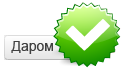
<style>
.page{position:relative;width:121px;height:71px;background:#ffffff}
.page>*{position:absolute;margin:0}
.t1{font:14px "ArialMT";color:#414141}
</style>
<div class="page">
<p class="t1" style="left:11px;top:41px;width:42px;height:13px">Даром</p>
</div>
